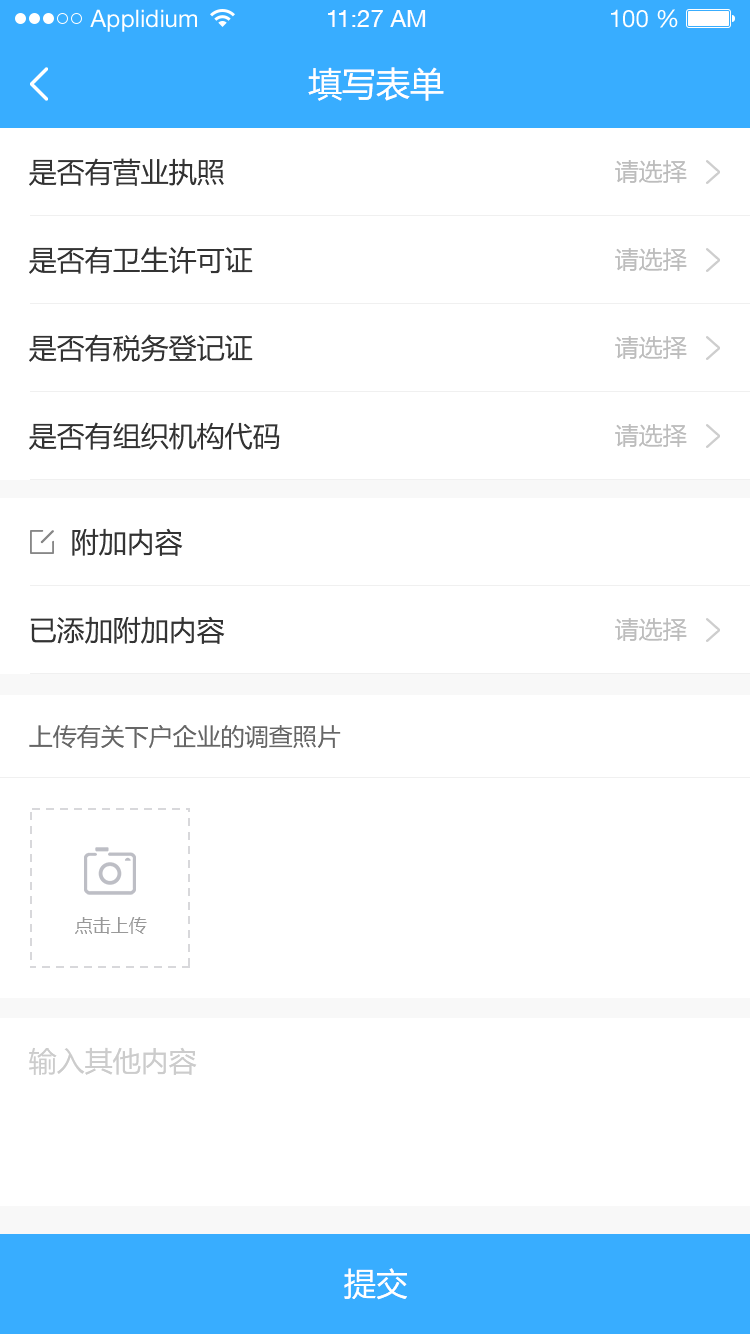
<style>
.page{position:relative;width:750px;height:1334px;background:#ffffff}
.page>*{position:absolute;margin:0}
.t1{font:24px "HelveticaNeueLTStd-Roman";color:#ffffff}
.t2{font:24px "HelveticaNeueCE-Roman";color:#ffffff}
.t3{font:34px "MicrosoftYaHei";color:#ffffff}
.t4{font:28px "MicrosoftYaHei";color:#333333}
.t5{font:24px "MicrosoftYaHei";color:#bdbdbd}
.t6{font:24px "MicrosoftYaHei";color:#666666}
.t7{font:18px "MicrosoftYaHei";color:#999999}
.t8{font:28px "MicrosoftYaHei";color:#cdcdcd}
.t9{font:32px "MicrosoftYaHei";color:#ffffff}
</style>
<div class="page">
<p class="t1" style="left:90px;top:9px;width:107px;height:23px">Applidium</p>
<p class="t2" style="left:328px;top:10px;width:98px;height:17px">11:27 AM</p>
<p class="t1" style="left:611px;top:9px;width:67px;height:19px">100 %</p>
<p class="t3" style="left:308px;top:67px;width:136px;height:34px">填写表单</p>
<p class="t4" style="left:29px;top:158px;width:195px;height:28px">是否有营业执照</p>
<p class="t5" style="left:615px;top:160px;width:72px;height:23px">请选择</p>
<p class="t4" style="left:29px;top:246px;width:224px;height:28px">是否有卫生许可证</p>
<p class="t5" style="left:615px;top:248px;width:72px;height:23px">请选择</p>
<p class="t4" style="left:29px;top:334px;width:224px;height:28px">是否有税务登记证</p>
<p class="t5" style="left:615px;top:336px;width:72px;height:23px">请选择</p>
<p class="t4" style="left:29px;top:422px;width:251px;height:28px">是否有组织机构代码</p>
<p class="t5" style="left:615px;top:424px;width:72px;height:23px">请选择</p>
<p class="t4" style="left:72px;top:528px;width:111px;height:28px">附加内容</p>
<p class="t4" style="left:30px;top:616px;width:195px;height:28px">已添加附加内容</p>
<p class="t5" style="left:615px;top:618px;width:72px;height:23px">请选择</p>
<p class="t6" style="left:29px;top:725px;width:312px;height:24px">上传有关下户企业的调查照片</p>
<p class="t7" style="left:75px;top:917px;width:72px;height:17px">点击上传</p>
<p class="t8" style="left:29px;top:1047px;width:168px;height:28px">输入其他内容</p>
<p class="t9" style="left:344px;top:1268px;width:63px;height:32px">提交</p>
</div>
